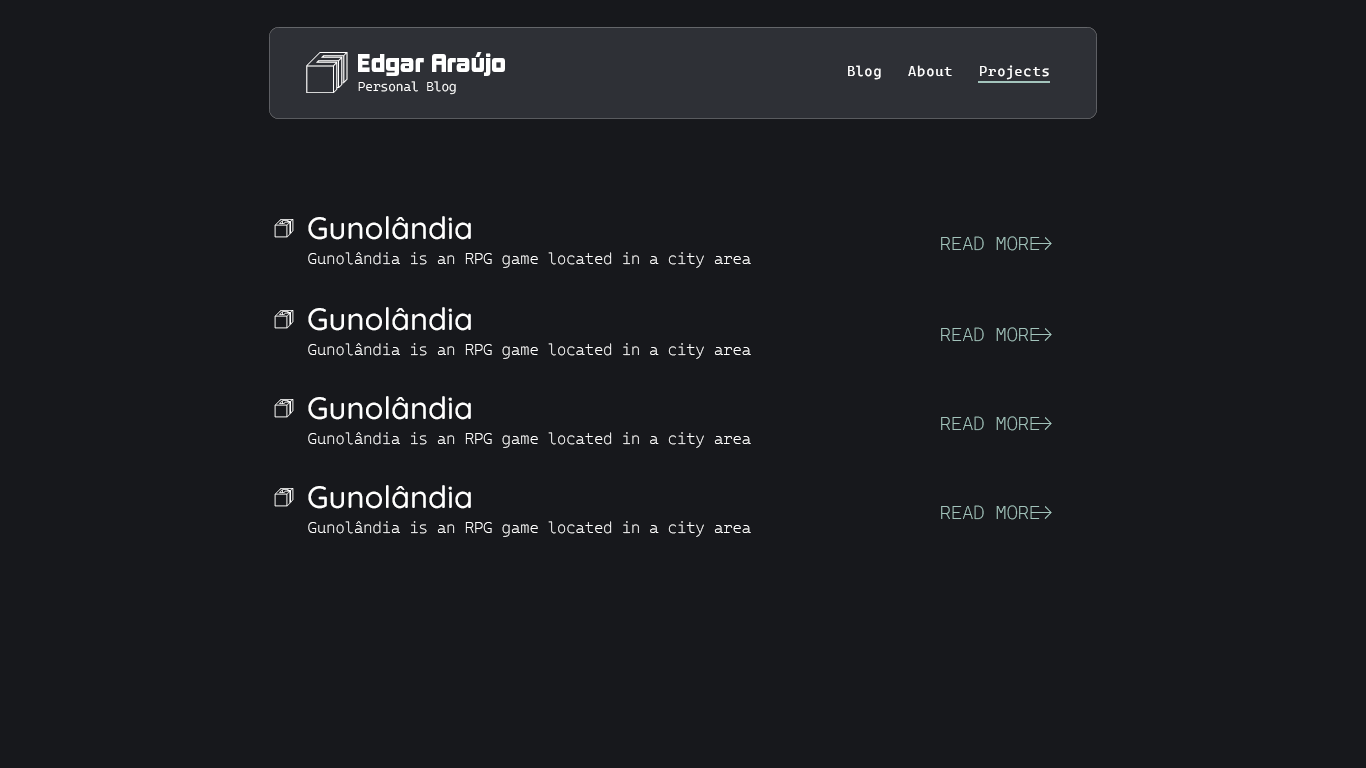
<style>
.page{position:relative;width:1366px;height:768px;background:#17181c}
.page>*{position:absolute;margin:0}
.t1{font:18.6px "Cube";letter-spacing:-0.72em;color:#ffffff}
.t2{font:24px "KimberleyBl-Regular";color:#ffffff}
.t3{font:14px "CascadiaCode-Roman";letter-spacing:0.06em;color:#ffffff}
.t4{font:13px "CascadiaCodeRoman-Light";color:#ffffff}
.t5{font:8.4px "Cube";color:#ffffff}
.t6{font:30.9px "Quicksand-Medium";color:#ffffff}
.t7{font:19px "CascadiaCodeRoman-ExtraLight";color:#a3c4bc}
.t8{font:15.8px "CascadiaCodeRoman-ExtraLight";color:#ffffff}
</style>
<div class="page">
<p class="t1" style="left:306px;top:52px;width:42px;height:41px">E</p>
<p class="t2" style="left:358px;top:52px;width:147px;height:24px">Edgar Araújo</p>
<p class="t3" style="left:848px;top:65px;width:33px;height:15px">Blog</p>
<p class="t3" style="left:908px;top:65px;width:44px;height:12px">About</p>
<p class="t3" style="left:980px;top:65px;width:69px;height:15px">Projects</p>
<p class="t4" style="left:358px;top:81px;width:98px;height:14px">Personal Blog</p>
<p class="t5" style="left:274px;top:219px;width:20px;height:19px">G</p>
<p class="t6" style="left:308px;top:216px;width:163px;height:24px">Gunolândia</p>
<p class="t7" style="left:941px;top:236px;width:99px;height:15px">READ MORE</p>
<p class="t7" style="left:1031px;top:237px;width:21px;height:13px">-&gt;</p>
<p class="t8" style="left:308px;top:252px;width:443px;height:16px">Gunolândia is an RPG game located in a city area</p>
<p class="t5" style="left:274px;top:310px;width:20px;height:19px">G</p>
<p class="t6" style="left:308px;top:307px;width:163px;height:24px">Gunolândia</p>
<p class="t7" style="left:941px;top:327px;width:99px;height:15px">READ MORE</p>
<p class="t7" style="left:1031px;top:328px;width:21px;height:13px">-&gt;</p>
<p class="t8" style="left:308px;top:343px;width:443px;height:16px">Gunolândia is an RPG game located in a city area</p>
<p class="t5" style="left:274px;top:399px;width:20px;height:19px">G</p>
<p class="t6" style="left:308px;top:396px;width:163px;height:24px">Gunolândia</p>
<p class="t7" style="left:941px;top:416px;width:99px;height:15px">READ MORE</p>
<p class="t7" style="left:1031px;top:417px;width:21px;height:13px">-&gt;</p>
<p class="t8" style="left:308px;top:432px;width:443px;height:16px">Gunolândia is an RPG game located in a city area</p>
<p class="t6" style="left:308px;top:485px;width:163px;height:24px">Gunolândia</p>
<p class="t5" style="left:274px;top:488px;width:20px;height:19px">G</p>
<p class="t7" style="left:941px;top:505px;width:99px;height:15px">READ MORE</p>
<p class="t7" style="left:1031px;top:506px;width:21px;height:13px">-&gt;</p>
<p class="t8" style="left:308px;top:521px;width:443px;height:16px">Gunolândia is an RPG game located in a city area</p>
</div>
